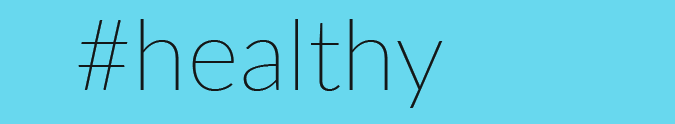
<style>
.page{position:relative;width:675px;height:124px;background:#68d8ee}
.page>*{position:absolute;margin:0}
.t1{font:100px "Lato-Thin";color:#141819}
</style>
<div class="page">
<p class="t1" style="left:78px;top:19px;width:365px;height:89px">#healthy</p>
</div>
